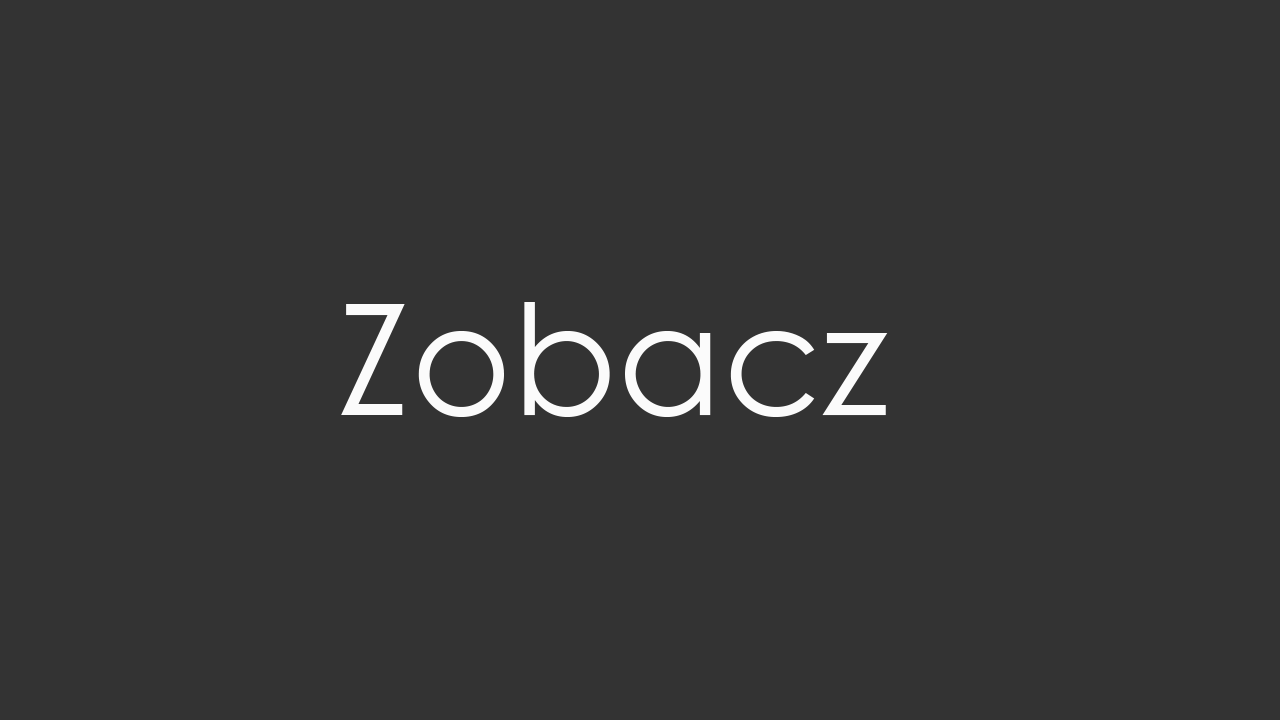
<style>
.page{position:relative;width:1280px;height:720px;background:#333333}
.page>*{position:absolute;margin:0}
.t1{font:154.2px "CenturyGothic";color:#fbfbfb}
</style>
<div class="page">
<p class="t1" style="left:341px;top:302px;width:547px;height:115px">Zobacz</p>
</div>
